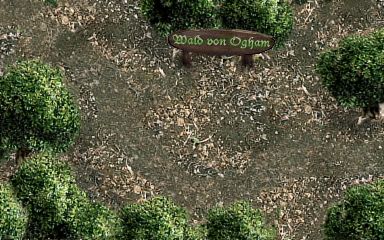
<style>
.page{position:relative;width:384px;height:240px}
.page>*{position:absolute;margin:0}
.t1{font:12px "DucDeBerry";letter-spacing:0.02em;color:#95b57a;scale:1.13 1}
</style>
<div class="page">
<p class="t1" style="left:173px;top:34px;width:97px;height:15px;rotate:2deg">Wald von Ogham</p>
</div>
